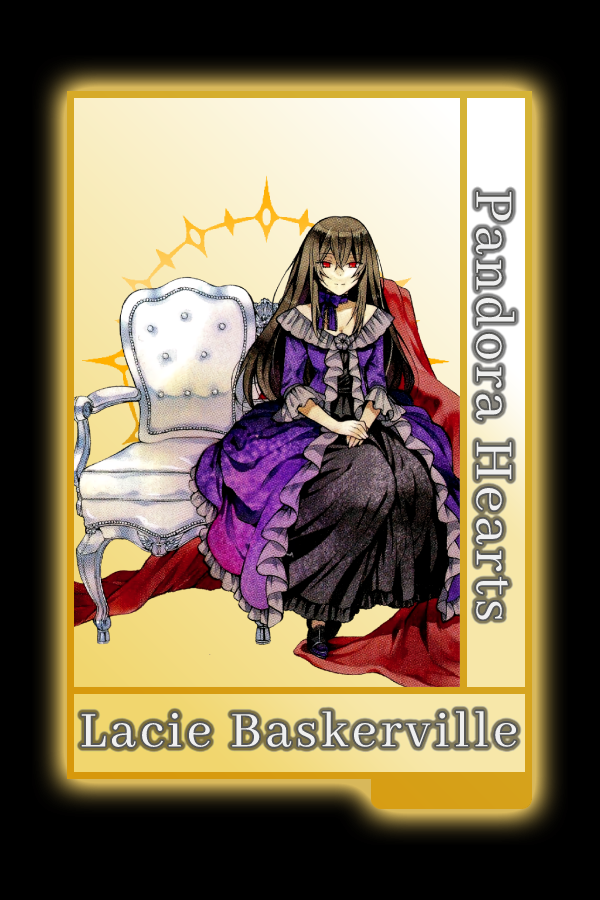
<style>
.page{position:relative;width:600px;height:900px;background:#000000}
.page>*{position:absolute;margin:0}
.t1{font:59.1px "AbhayaLibre-Regular";letter-spacing:0.072em;color:#efefef}
.t2{font:55px "AbhayaLibre-Regular";letter-spacing:0.072em;color:#efefef}
</style>
<div class="page">
<p class="t1" style="left:476px;top:192px;width:39px;height:428px;rotate:90deg">Pandora Hearts</p>
<p class="t2" style="left:81px;top:711px;width:436px;height:36px">Lacie Baskerville</p>
</div>
